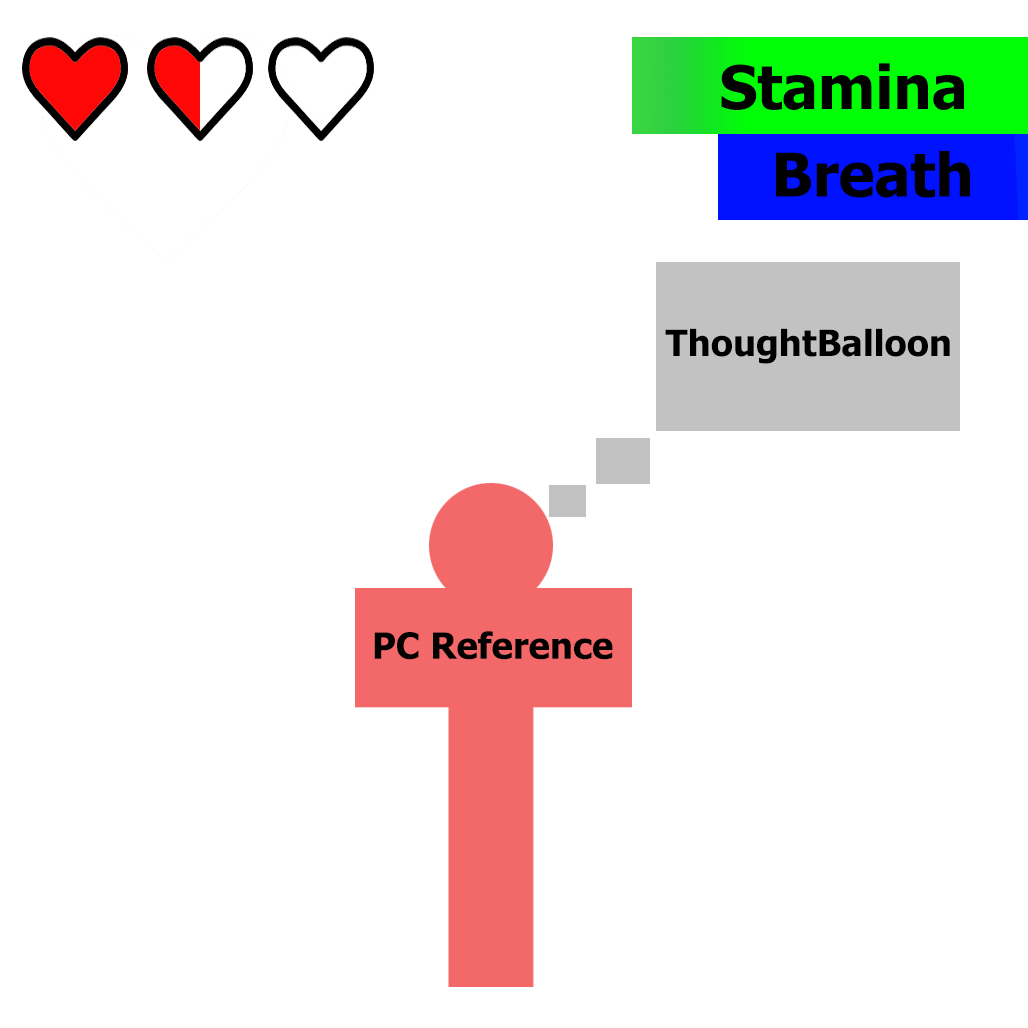
<style>
.page{position:relative;width:1028px;height:1028px;background:#ffffff}
.page>*{position:absolute;margin:0}
.t1{font:60px "Tahoma-Bold";color:#000000}
.t2{font:36px "Tahoma-Bold";color:#000000}
</style>
<div class="page">
<p class="t1" style="left:721px;top:63px;width:243px;height:47px">Stamina</p>
<p class="t1" style="left:776px;top:151px;width:194px;height:47px">Breath</p>
<p class="t2" style="left:665px;top:328px;width:285px;height:36px">ThoughtBalloon</p>
<p class="t2" style="left:374px;top:631px;width:239px;height:29px">PC Reference</p>
</div>
